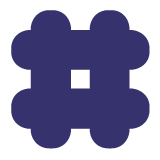
<style>
.page{position:relative;width:160px;height:160px;background:#35326e}
.page>*{position:absolute;margin:0}
.t1{font:256px "Biff-Classic";color:#35326e}
</style>
<div class="page">
<p class="t1" style="left:11px;top:10px;width:139px;height:139px">#</p>
</div>
